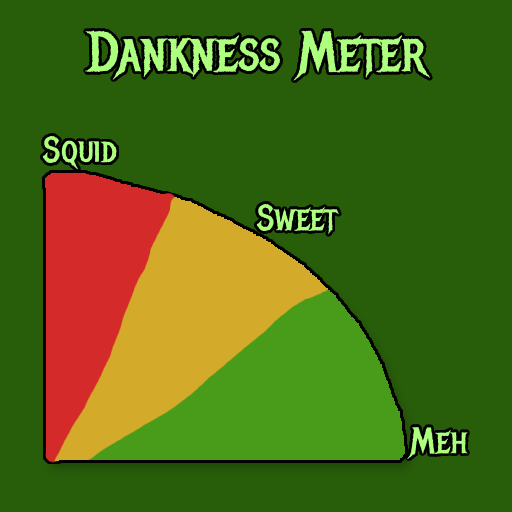
<style>
.page{position:relative;width:512px;height:512px;background:#285e0a}
.page>*{position:absolute;margin:0}
.t1{font:56px "MetalMania-Regular";color:#adff7e}
.t2{font:36px "MetalMania-Regular";color:#adff7e}
</style>
<div class="page">
<p class="t1" style="left:85px;top:30px;width:346px;height:51px">Dankness Meter</p>
<p class="t2" style="left:256px;top:203px;width:83px;height:32px">Sweet</p>
<p class="t2" style="left:407px;top:427px;width:62px;height:33px">Meh</p>
</div>
